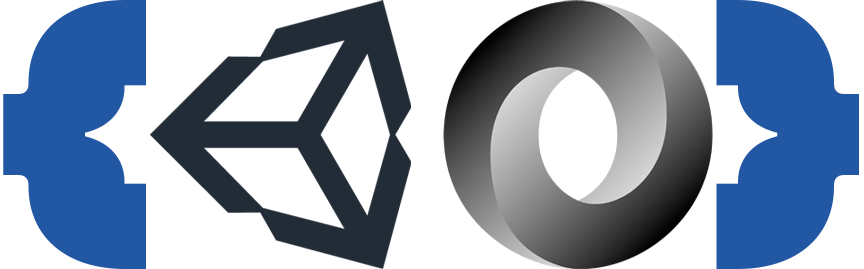
<style>
.page{position:relative;width:864px;height:269px;background:#ffffff}
.page>*{position:absolute;margin:0}
.t1{font:358.3px "FactionPersonal-Black";color:#2257a3}
</style>
<div class="page">
<p class="t1" style="left:3px;top:0px;width:143px;height:269px">{</p>
<p class="t1" style="left:716px;top:0px;width:143px;height:269px">}</p>
</div>
